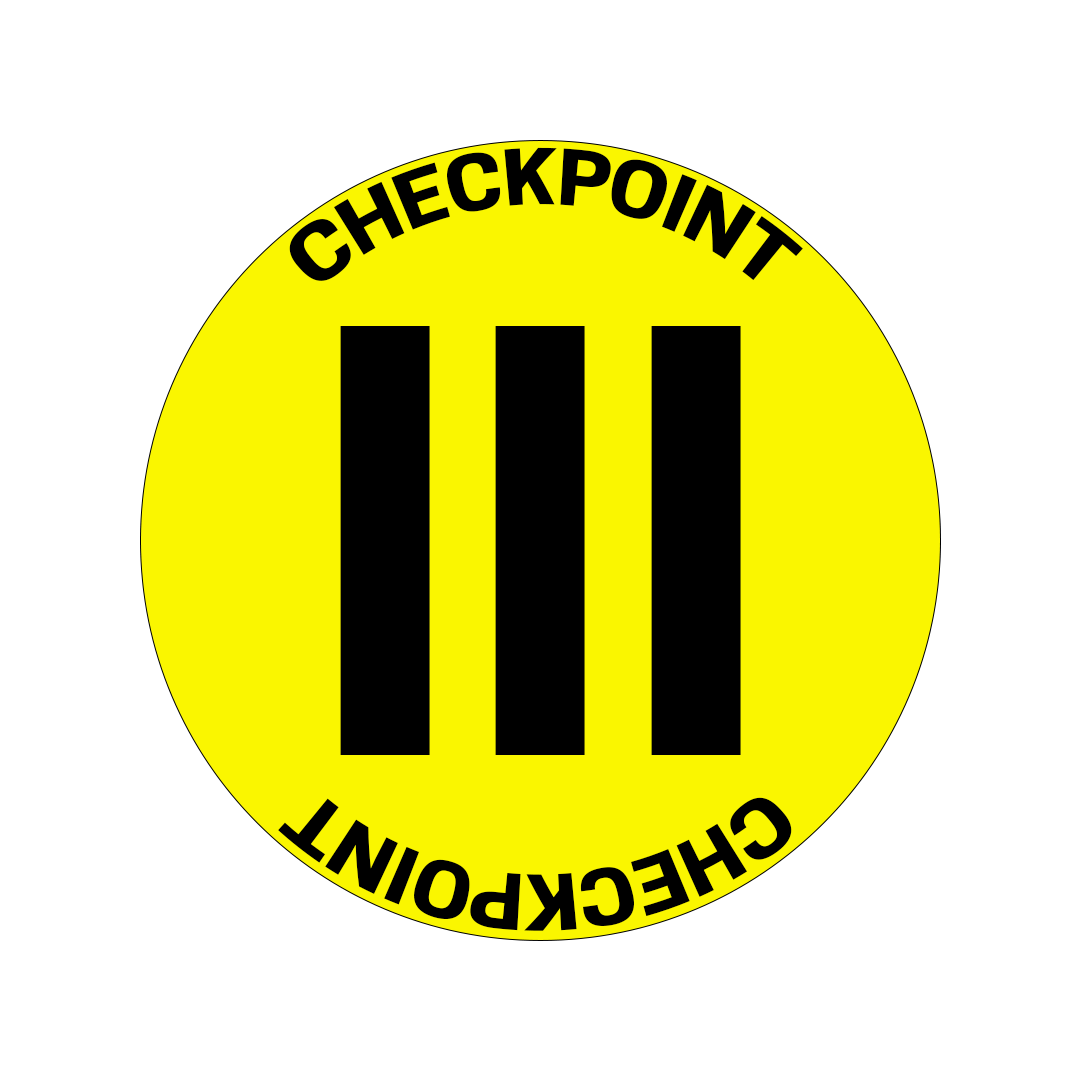
<style>
.page{position:relative;width:1080px;height:1080px;background:#ffffff}
.page>*{position:absolute;margin:0}
.t1{font:72px "CooperHewitt-Bold";color:#000000}
.t2{font:550px "CooperHewitt-Bold";color:#000000}
</style>
<div class="page">
<p class="t1" style="left:289px;top:147px;width:514px;height:134px;text-align:center">CHECKPOINT</p>
<p class="t2" style="left:340px;top:326px;width:401px;height:429px">III</p>
<p class="t1" style="left:278px;top:797px;width:514px;height:134px;rotate:180deg">CHECKPOINT</p>
</div>
